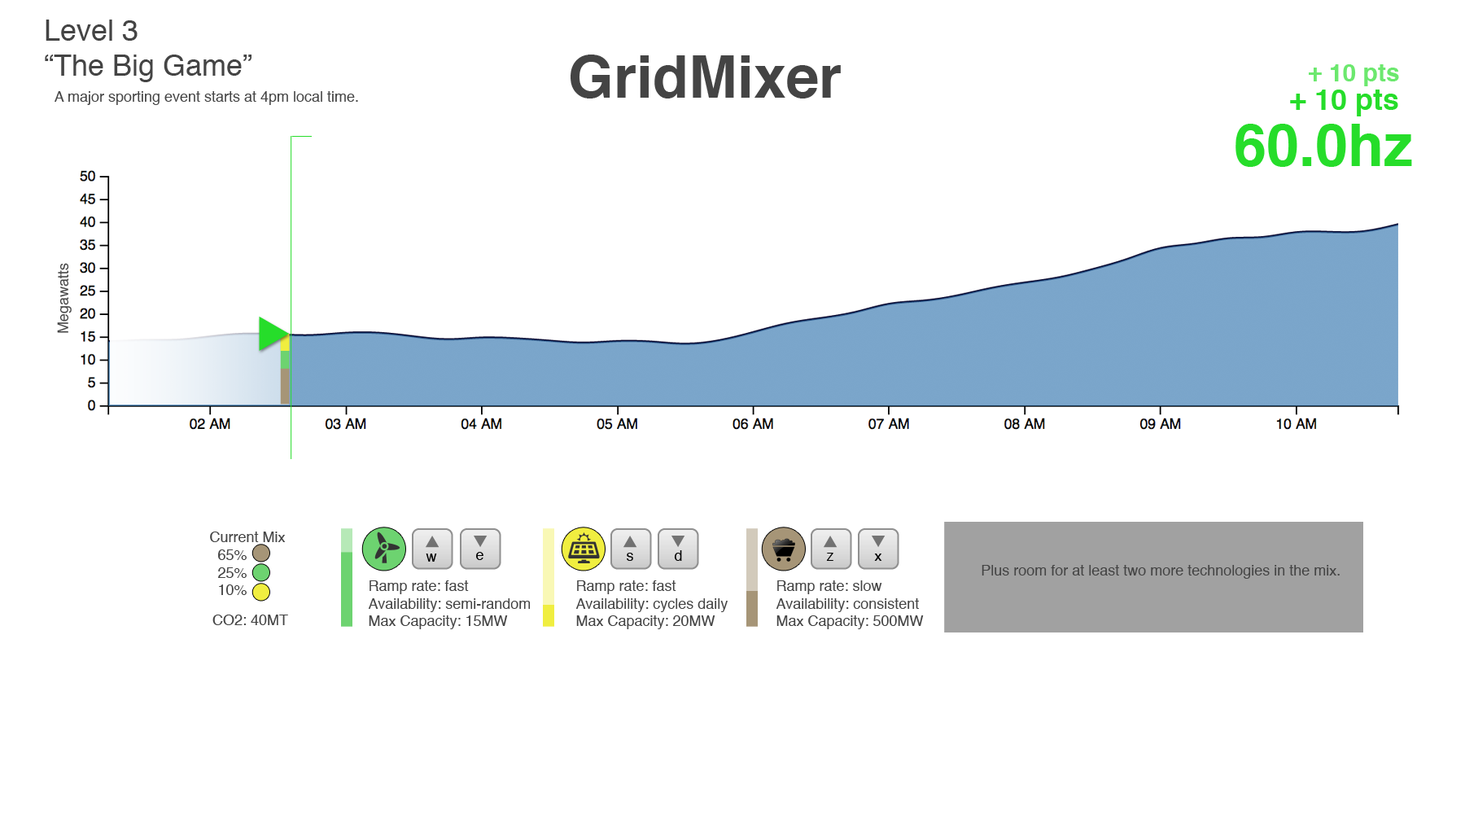
<style>
.page{position:relative;width:1465px;height:814px;background:#ffffff}
.page>*{position:absolute;margin:0}
.t1{font:29.3px "Helvetica";color:#444444}
.t2{font:58.6px "Helvetica-Bold";color:#444444}
.t3{font:24.4px "Helvetica-Bold";color:#6ce86e}
.t4{font:29.3px "Helvetica-Bold";color:#26dd2a}
.t5{font:14.7px "Helvetica";color:#444444}
.t6{font:58.6px "Helvetica-Bold";color:#26dd2a}
.t7{font:14.7px "Helvetica";color:#000000}
</style>
<div class="page">
<p class="t1" style="left:45px;top:20px;width:207px;height:62px">Level 3<br>“The Big Game”</p>
<p class="t2" style="left:571px;top:55px;width:270px;height:43px">GridMixer</p>
<p class="t3" style="left:1309px;top:64px;width:90px;height:22px">+ 10 pts</p>
<p class="t4" style="left:1290px;top:90px;width:108px;height:26px">+ 10 pts</p>
<p class="t5" style="left:55px;top:91px;width:303px;height:14px">A major sporting event starts at 4pm local time.</p>
<p class="t6" style="left:1236px;top:124px;width:176px;height:43px">60.0hz</p>
<p class="t5" style="left:57px;top:263px;width:15px;height:70px;rotate:-90deg">Megawatts</p>
<p class="t5" style="left:210px;top:531px;width:76px;height:64px">Current Mix<br>  65% <br>  25%<br>  10%</p>
<p class="t7" style="left:426px;top:553px;width:11px;height:9px">w</p>
<p class="t7" style="left:476px;top:552px;width:7px;height:8px">e</p>
<p class="t7" style="left:627px;top:553px;width:6px;height:8px">s</p>
<p class="t7" style="left:674px;top:550px;width:8px;height:11px">d</p>
<p class="t7" style="left:826px;top:553px;width:7px;height:8px">z</p>
<p class="t7" style="left:874px;top:553px;width:8px;height:8px">x</p>
<p class="t5" style="left:982px;top:565px;width:358px;height:14px">Plus room for at least two more technologies in the mix.</p>
<p class="t5" style="left:368px;top:580px;width:163px;height:49px">Ramp rate: fast<br>Availability: semi-random<br>Max Capacity: 15MW</p>
<p class="t5" style="left:575px;top:580px;width:153px;height:49px">Ramp rate: fast<br>Availability: cycles daily<br>Max Capacity: 20MW</p>
<p class="t5" style="left:776px;top:580px;width:148px;height:49px">Ramp rate: slow<br>Availability: consistent<br>Max Capacity: 500MW</p>
<p class="t5" style="left:212px;top:615px;width:76px;height:10px">CO2: 40MT</p>
</div>
